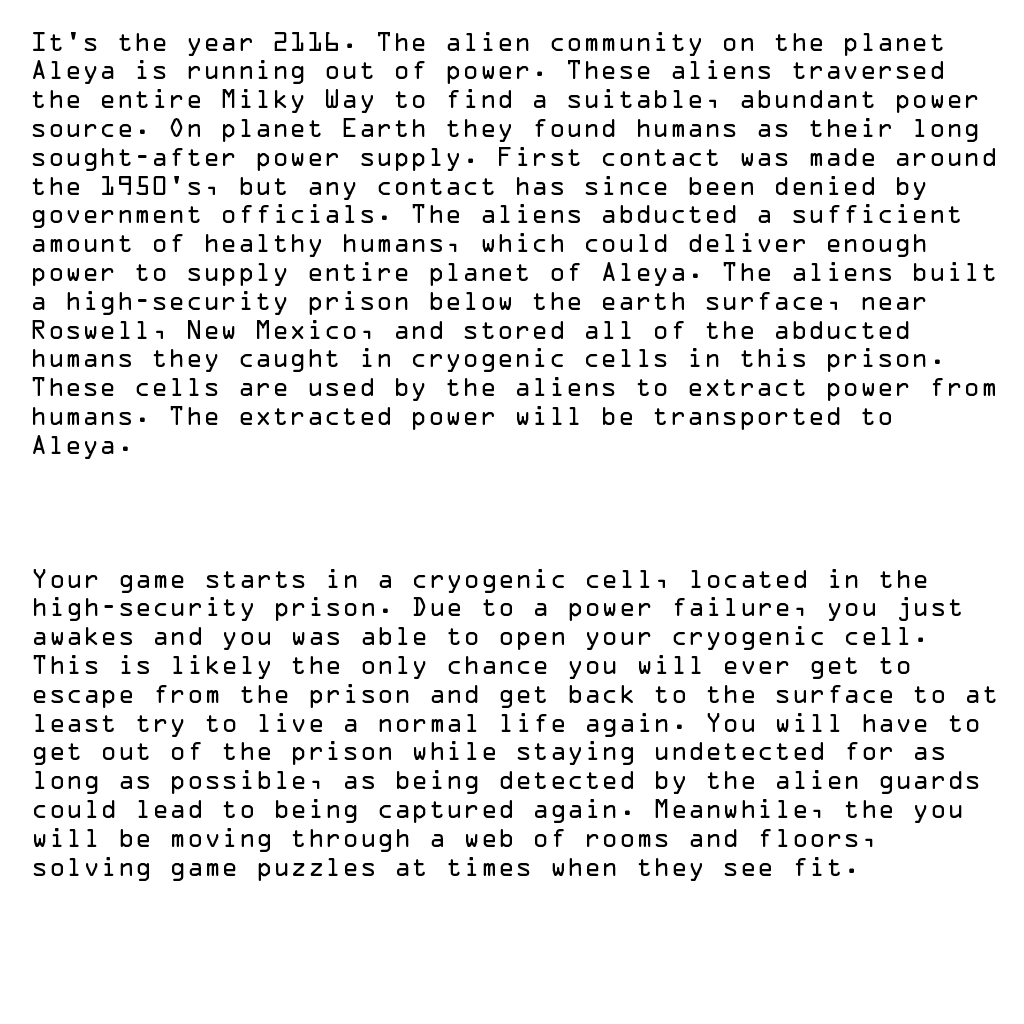
<style>
.page{position:relative;width:1024px;height:1024px;background:#ffffff}
.page>*{position:absolute;margin:0}
.t1{font:24px "OCRAStd";color:#000000}
</style>
<div class="page">
<p class="t1" style="left:32px;top:32px;width:963px;height:427px">It's the year 2116. The alien community on the planet Aleya is running out of power. These aliens traversed the entire Milky Way to find a suitable, abundant power source. On planet Earth they found humans as their long sought-after power supply. First contact was made around the 1950's, but any contact has since been denied by government officials. The aliens abducted a sufficient amount of healthy humans, which could deliver enough power to supply entire planet of Aleya. The aliens built a high-security prison below the earth surface, near Roswell, New Mexico, and stored all of the abducted humans they caught in cryogenic cells in this prison. These cells are used by the aliens to extract power from humans. The extracted power will be transported to Aleya.</p>
<p class="t1" style="left:33px;top:569px;width:963px;height:312px">Your game starts in a cryogenic cell, located in the high-security prison. Due to a power failure, you just awakes and you was able to open your cryogenic cell. This is likely the only chance you will ever get to escape from the prison and get back to the surface to at least try to live a normal life again. You will have to get out of the prison while staying undetected for as long as possible, as being detected by the alien guards could lead to being captured again. Meanwhile, the you will be moving through a web of rooms and floors, solving game puzzles at times when they see fit.</p>
</div>
